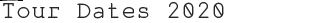
<style>
.page{position:relative;width:312px;height:23px;background:#ffffff}
.page>*{position:absolute;margin:0}
.t1{font:25px "Slurpette-Regular";color:#292929}
</style>
<div class="page">
<p class="t1" style="left:3px;top:2px;width:221px;height:17px">Tour Dates 2020</p>
</div>
